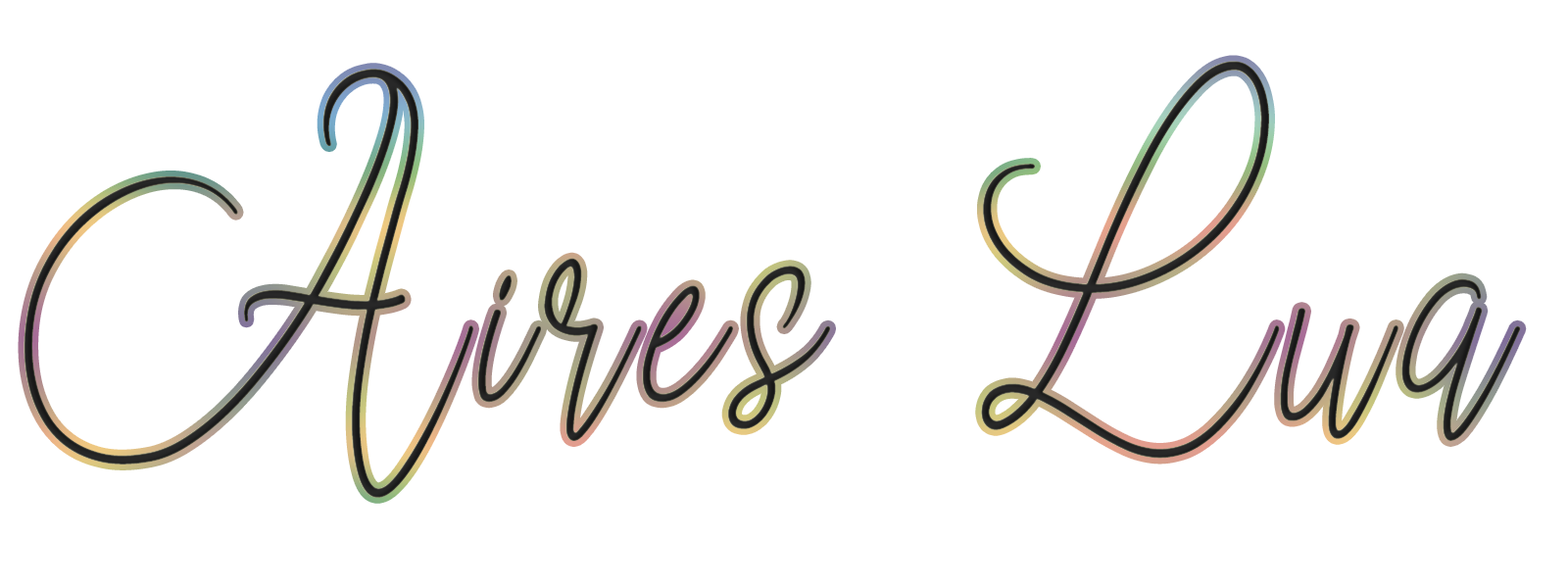
<style>
.page{position:relative;width:1568px;height:588px;background:#ffffff}
.page>*{position:absolute;margin:0}
.t1{font:443.1px "MoonChin";letter-spacing:0.047em;color:#282828;scale:0.92 1}
</style>
<div class="page">
<p class="t1" style="left:24px;top:61px;width:1497px;height:437px">Aires Lua</p>
</div>
